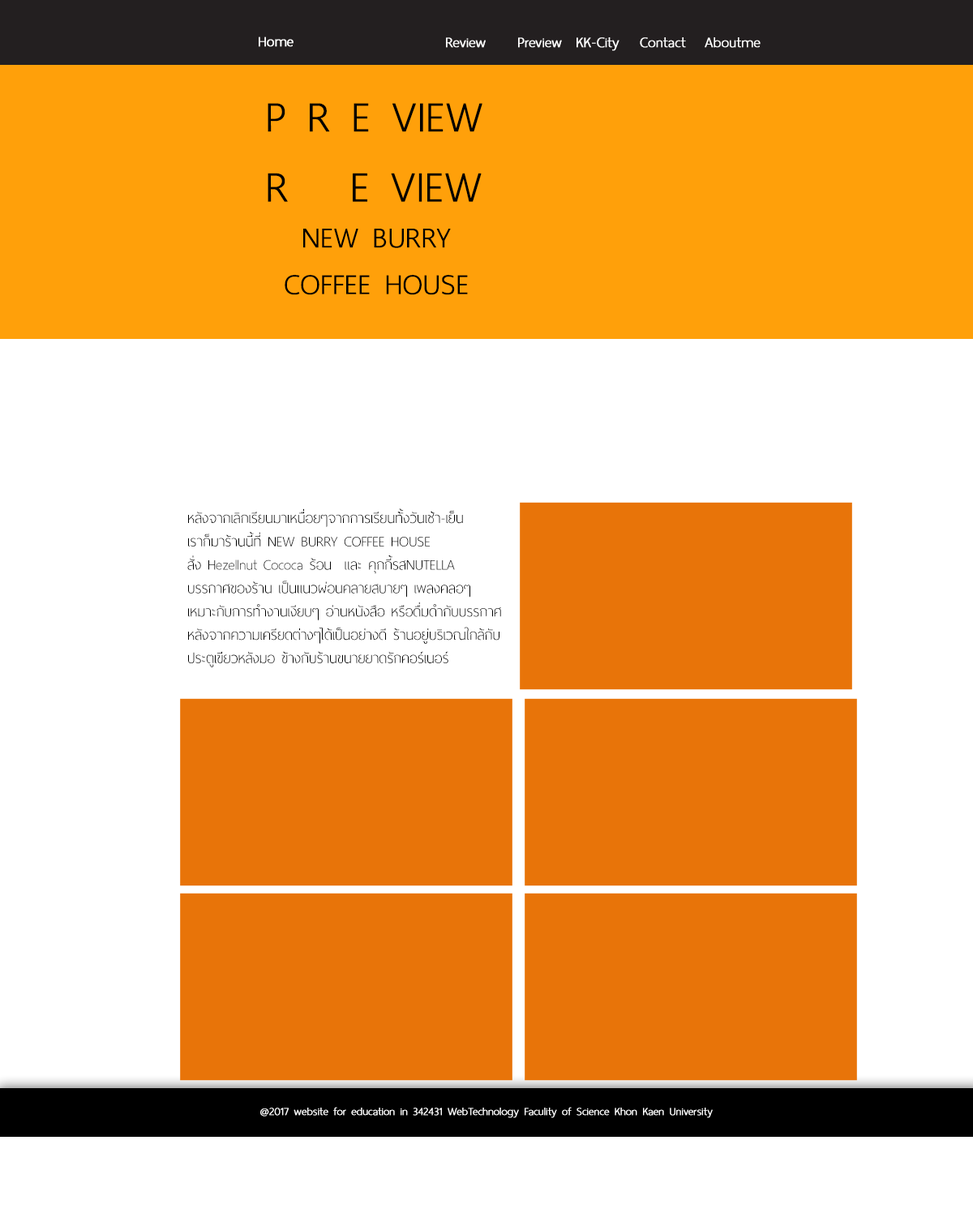
<style>
.page{position:relative;width:973px;height:1226px;background:#ffffff}
.page>*{position:absolute;margin:0}
.t1{font:19.5px "ThaiSansNeue-ExtraLight";color:#ffffff;font-weight:bold}
.t2{font:58.4px "ThaiSansNeue-ExtraLight";color:#000000;font-weight:bold}
.t3{font:38.9px "ThaiSansNeue-ExtraLight";color:#000000;font-weight:bold}
.t4{font:19.5px "ThaiSansNeue-ExtraLight";color:#000000}
.t5{font:14.6px "ThaiSansNeue-ExtraLight";color:#ffffff;font-weight:bold}
</style>
<div class="page">
<p class="t1" style="left:259px;top:36px;width:34px;height:11px">Home</p>
<p class="t1" style="left:446px;top:37px;width:40px;height:11px">Review</p>
<p class="t1" style="left:518px;top:37px;width:44px;height:11px">Preview</p>
<p class="t1" style="left:576px;top:37px;width:43px;height:14px">KK-City</p>
<p class="t1" style="left:640px;top:37px;width:46px;height:11px">Contact</p>
<p class="t1" style="left:704px;top:37px;width:56px;height:11px">Aboutme</p>
<p class="t2" style="left:268px;top:103px;width:214px;height:99px">P R E VIEW<br>R   E VIEW</p>
<p class="t3" style="left:285px;top:229px;width:183px;height:66px;text-align:center">NEW BURRY<br>COFFEE HOUSE</p>
<p class="t4" style="left:187px;top:508px;width:314px;height:159px">หลังจากเลิกเรียนมาเหนื่อยๆจากการเรียนท้ั้งวันเช้า-เย็น<br>เราก็มาร้านนี้ที่ NEW BURRY COFFEE HOUSE<br>สั่ง Hezellnut Cococa ร้อน  และ คุกกี้รสNUTELLA<br>บรรกาศของร้าน เป็นแนวผ่อนคลายสบายๆ เพลงคลอๆ<br>เหมาะกับการทำงานเงียบๆ อ่านหนังสือ หรือดื่มดำกับบรรกาศ<br>หลังจากความเครียดต่างๆได้เป็นอย่างดี ร้านอยู่บริเวณใกล้กับ<br>ประตูเขียวหลังมอ ข้างกับร้านขนายยาดรักคอร์เนอร์</p>
<p class="t5" style="left:260px;top:1107px;width:453px;height:11px">@2017 website for education in 342431 WebTechnology Faculity of Science Khon Kaen University</p>
</div>
